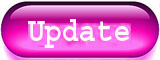
<style>
.page{position:relative;width:160px;height:60px}
.page>*{position:absolute;margin:0}
.t1{font:34.6px "Courier-Bold";color:#fdf8f8;scale:0.83 1}
</style>
<div class="page">
<p class="t1" style="left:28px;top:19px;width:102px;height:29px">Update</p>
</div>
